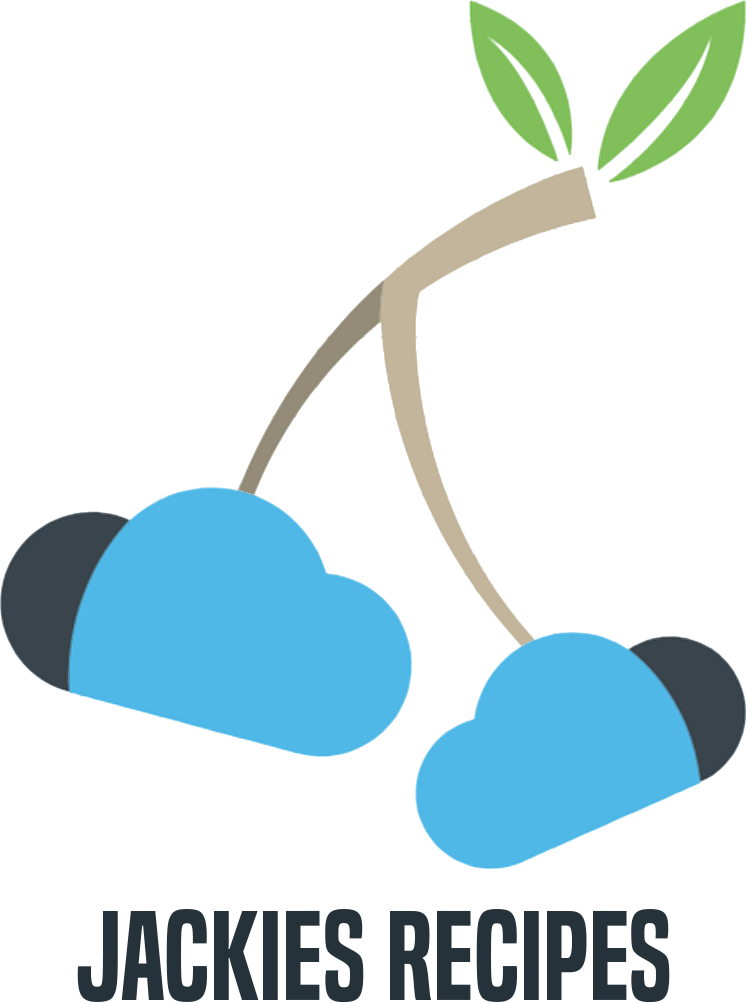
<style>
.page{position:relative;width:746px;height:1003px;background:#ffffff}
.page>*{position:absolute;margin:0}
.t1{font:117.3px "BuiltTitlingSb-Regular";color:#26323a}
</style>
<div class="page">
<p class="t1" style="left:77px;top:909px;width:593px;height:94px">JACKIES RECIPES</p>
</div>
